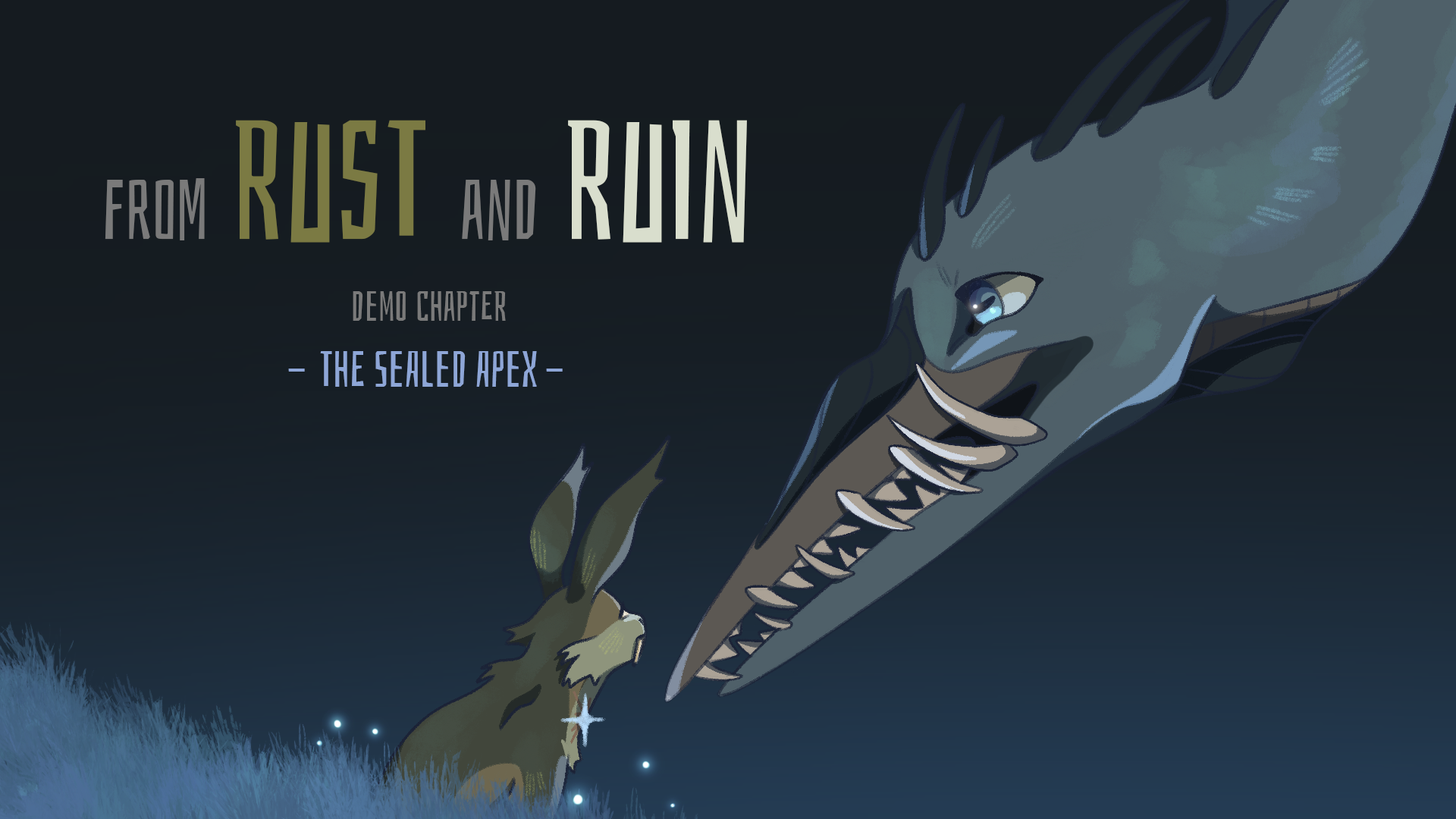
<style>
.page{position:relative;width:1456px;height:819px}
.page>*{position:absolute;margin:0}
.t1{font:83.4px "Bahiana-Regular";color:#7a7a7a}
.t2{font:166.8px "Bahiana-Regular";color:#7b7a43}
.t3{font:166.8px "Bahiana-Regular";color:#d9decd}
.t4{font:41.7px "Bahiana-Regular";color:#7a7a7a}
.t5{font:50px "Bahiana-Regular";color:#8ea6d7}
</style>
<div class="page">
<p class="t1" style="left:105px;top:120px;width:642px;height:123px">From <span class="t2">Rust </span>and <span class="t3">Ruin</span></p>
<p class="t4" style="left:353px;top:291px;width:153px;height:30px">Demo Chapter</p>
<p class="t5" style="left:288px;top:351px;width:275px;height:36px">THE SEALED APEX -</p>
</div>
